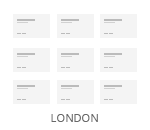
<style>
.page{position:relative;width:150px;height:130px;background:#ffffff}
.page>*{position:absolute;margin:0}
.t1{font:11px "OpenSans";color:#686868;text-transform:uppercase}
</style>
<div class="page">
<p class="t1" style="left:51px;top:114px;width:47px;height:8px">London</p>
</div>
